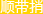
<style>
.page{position:relative;width:43px;height:14px;background:#ffd400}
.page>*{position:absolute;margin:0}
.t1{font:15px "STXihei";letter-spacing:-0.045em;color:#ffffff}
</style>
<div class="page">
<p class="t1" style="left:0px;top:0px;width:43px;height:14px">顺带捎</p>
</div>
